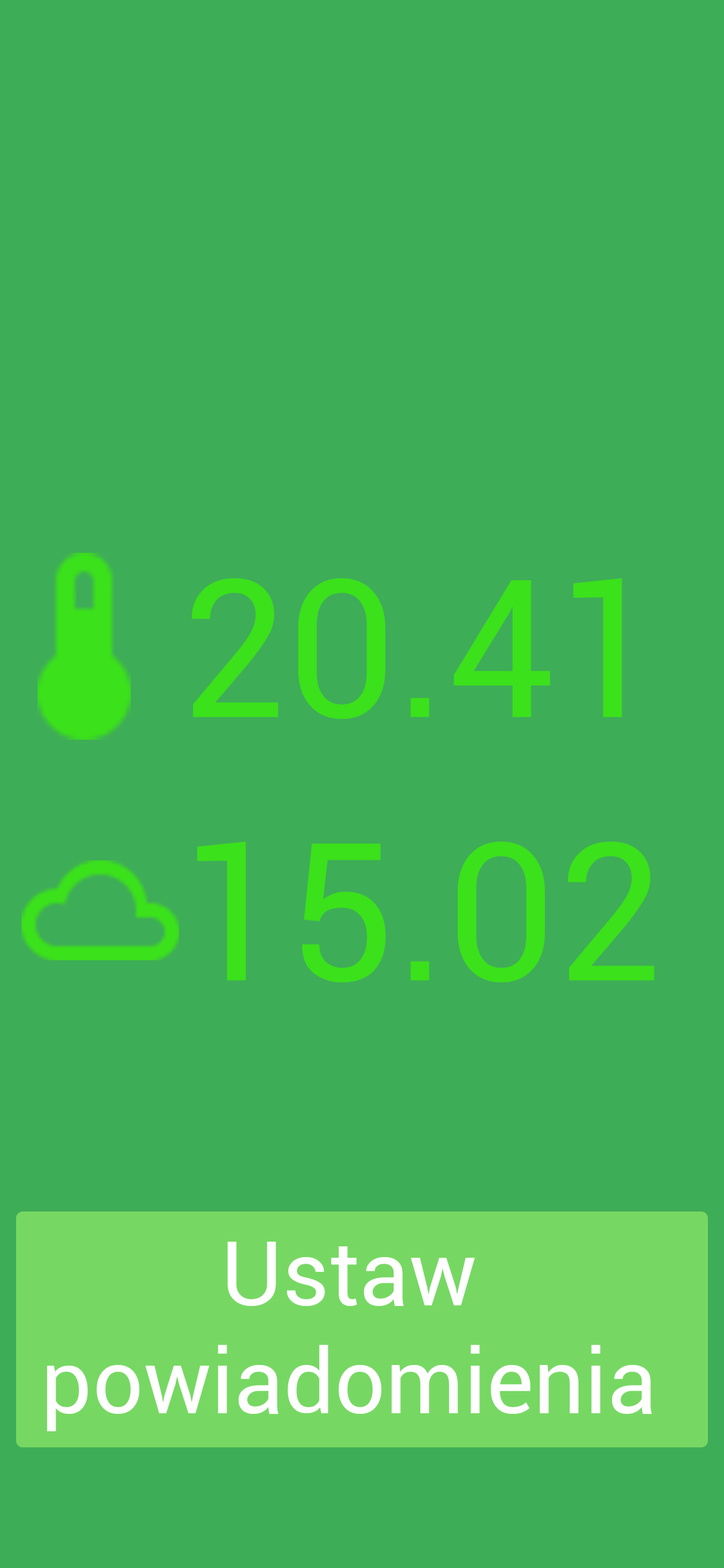
<style>
.page{position:relative;width:724px;height:1568px;background:#3ead57}
.page>*{position:absolute;margin:0}
.t1{font:192.3px "Roboto-Regular";color:#3be11a}
.t2{font:89.8px "Roboto-Regular";color:#ffffff}
</style>
<div class="page">
<p class="t1" style="left:192px;top:578px;width:430px;height:141px">20.41</p>
<p class="t1" style="left:197px;top:842px;width:457px;height:140px">15.02</p>
<p class="t2" style="left:47px;top:1242px;width:605px;height:189px;text-align:center">Ustaw <br>powiadomienia</p>
</div>
